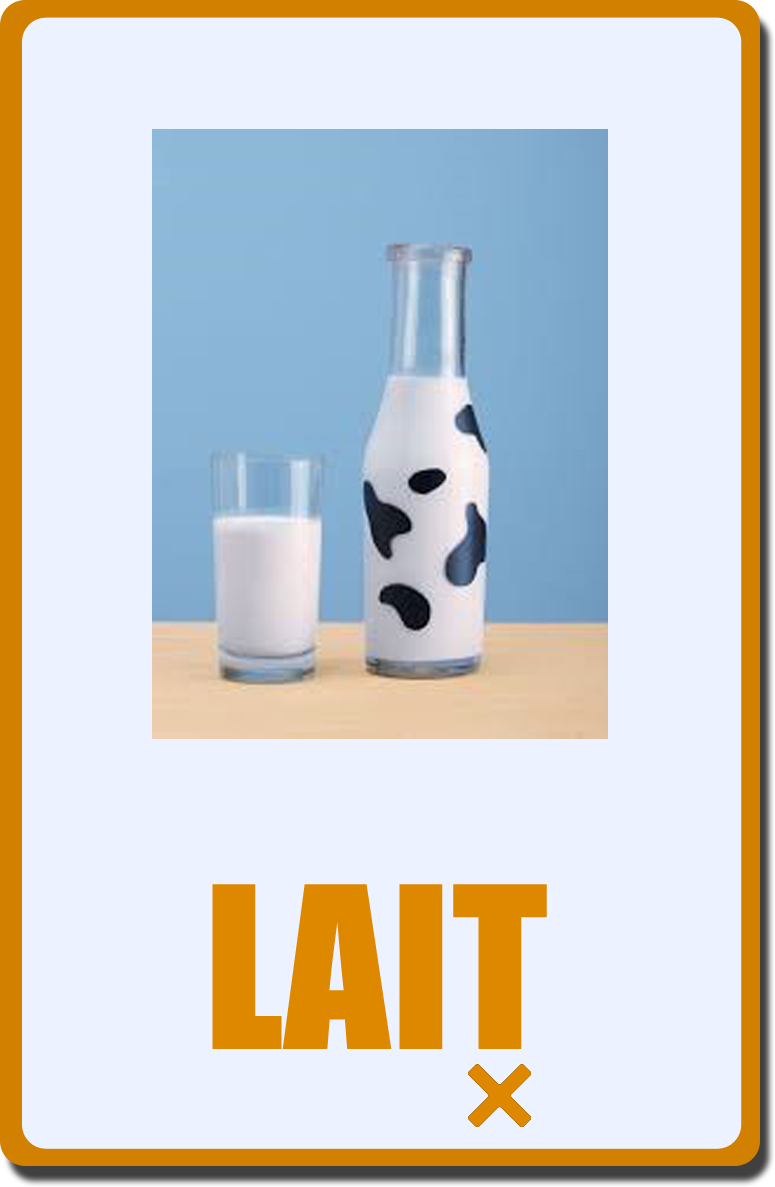
<style>
.page{position:relative;width:775px;height:1187px;background:#ecf2ff}
.page>*{position:absolute;margin:0}
.t1{font:208.3px "Impact";letter-spacing:0.005em;color:#de8800}
</style>
<div class="page">
<p class="t1" style="left:212px;top:884px;width:335px;height:165px">LAIT</p>
</div>
